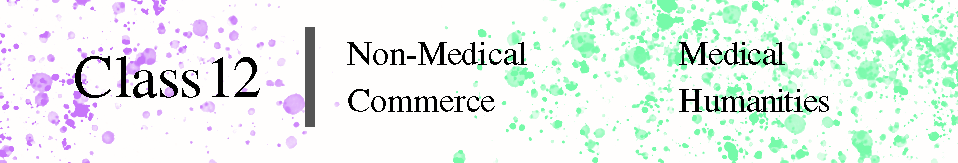
<style>
.page{position:relative;width:958px;height:163px;background:#fffefd}
.page>*{position:absolute;margin:0}
.t1{font:34.4px "OpusPlainChordsStd";color:#000000}
.t2{font:60px "OpusPlainChordsStd";color:#000000}
</style>
<div class="page">
<p class="t1" style="left:347px;top:42px;width:180px;height:23px">Non-Medical</p>
<p class="t1" style="left:679px;top:42px;width:106px;height:23px">Medical</p>
<p class="t2" style="left:75px;top:56px;width:185px;height:42px">Class 12</p>
<p class="t1" style="left:348px;top:89px;width:147px;height:23px">Commerce</p>
<p class="t1" style="left:679px;top:89px;width:150px;height:23px">Humanities</p>
</div>
